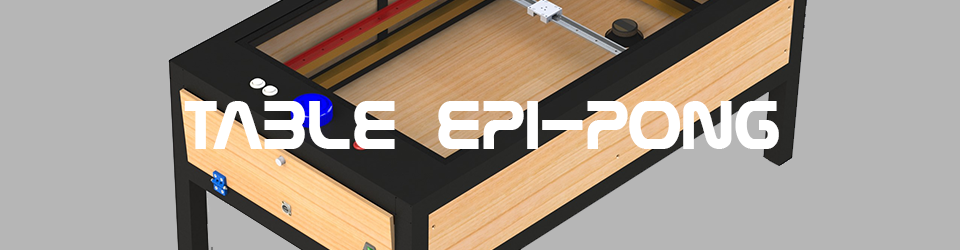
<style>
.page{position:relative;width:960px;height:250px;background:#b6b6b6}
.page>*{position:absolute;margin:0}
.t1{font:72px "Nasalization";color:#ffffff}
</style>
<div class="page">
<p class="t1" style="left:184px;top:101px;width:595px;height:48px">TABLE EPI-PONG</p>
</div>
